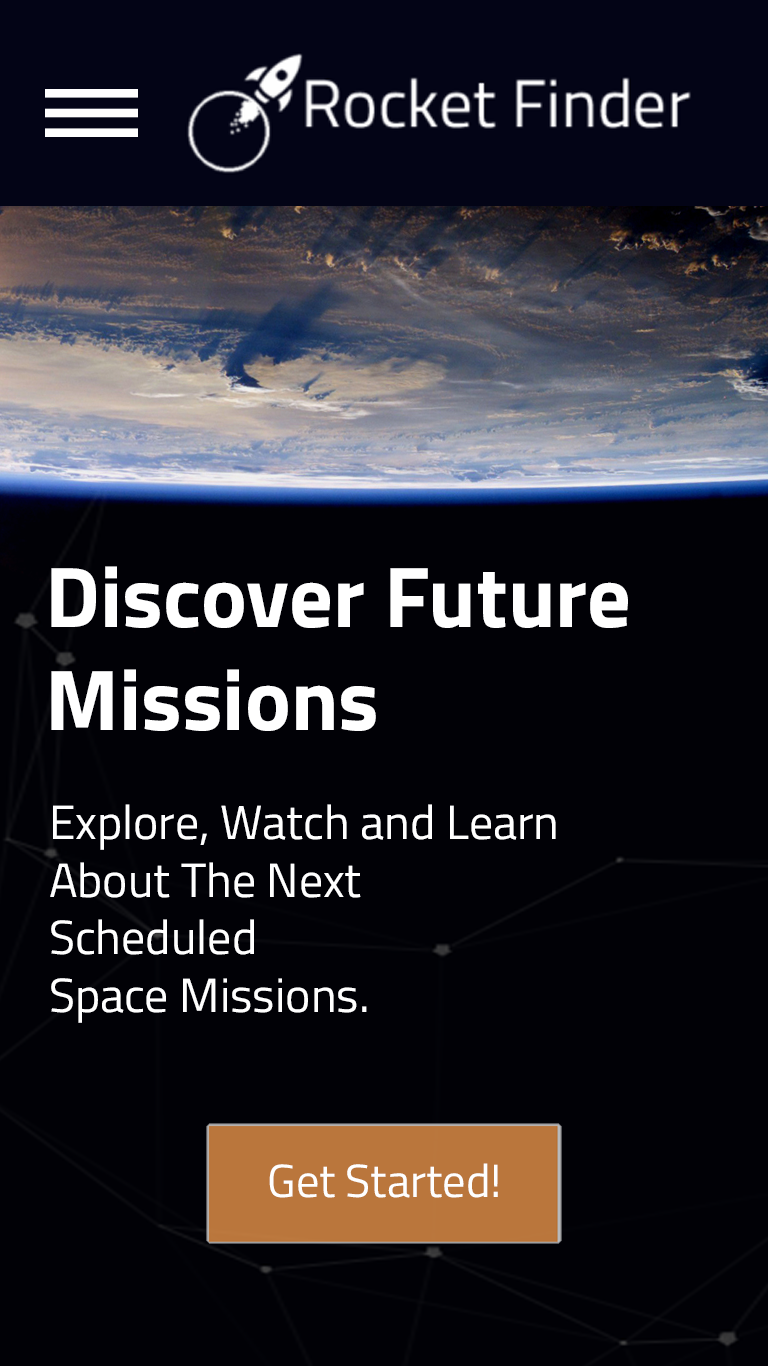
<style>
.page{position:relative;width:768px;height:1366px;background:#010106}
.page>*{position:absolute;margin:0}
.t1{font:86.3px "TitilliumWeb-Bold";color:#ffffff}
.t2{font:48px "TitilliumWeb-Regular";color:#ffffff}
.t3{font:46.5px "TitilliumWeb-Regular";color:#fefefe}
</style>
<div class="page">
<p class="t1" style="left:51px;top:566px;width:577px;height:165px">Discover Future <br>Missions</p>
<p class="t2" style="left:50px;top:804px;width:506px;height:219px">Explore, Watch and Learn<br>About The Next <br>Scheduled <br>Space Missions.</p>
<p class="t3" style="left:269px;top:1163px;width:229px;height:35px">Get Started!</p>
</div>
